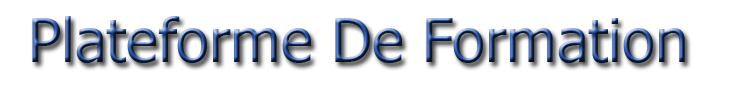
<style>
.page{position:relative;width:729px;height:108px;background:#ffffff}
.page>*{position:absolute;margin:0}
.t1{font:60px "Tahoma"}
</style>
<div class="page">
<p class="t1" style="left:32px;top:16px;width:653px;height:47px">Plateforme De Formation</p>
</div>
